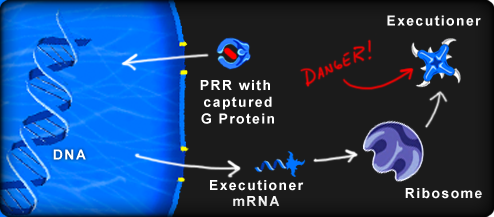
<style>
.page{position:relative;width:494px;height:217px;background:#1b1b1b}
.page>*{position:absolute;margin:0}
.t1{font:14px "Arial-BoldMT";letter-spacing:0.1em;color:#ffffff}
.t2{font:14px/16px "Arial-BoldMT";letter-spacing:0.1em;color:#ffffff}
</style>
<div class="page">
<p class="t1" style="left:387px;top:15px;width:94px;height:11px">Executioner</p>
<p class="t1" style="left:200px;top:80px;width:74px;height:44px;text-align:center">PRR with <br>captured<br>G Protein</p>
<p class="t1" style="left:53px;top:149px;width:33px;height:11px">DNA</p>
<p class="t2" style="left:210px;top:180px;width:94px;height:26px;text-align:center">Executioner<br>mRNA</p>
<p class="t1" style="left:405px;top:188px;width:77px;height:11px">Ribosome</p>
</div>
